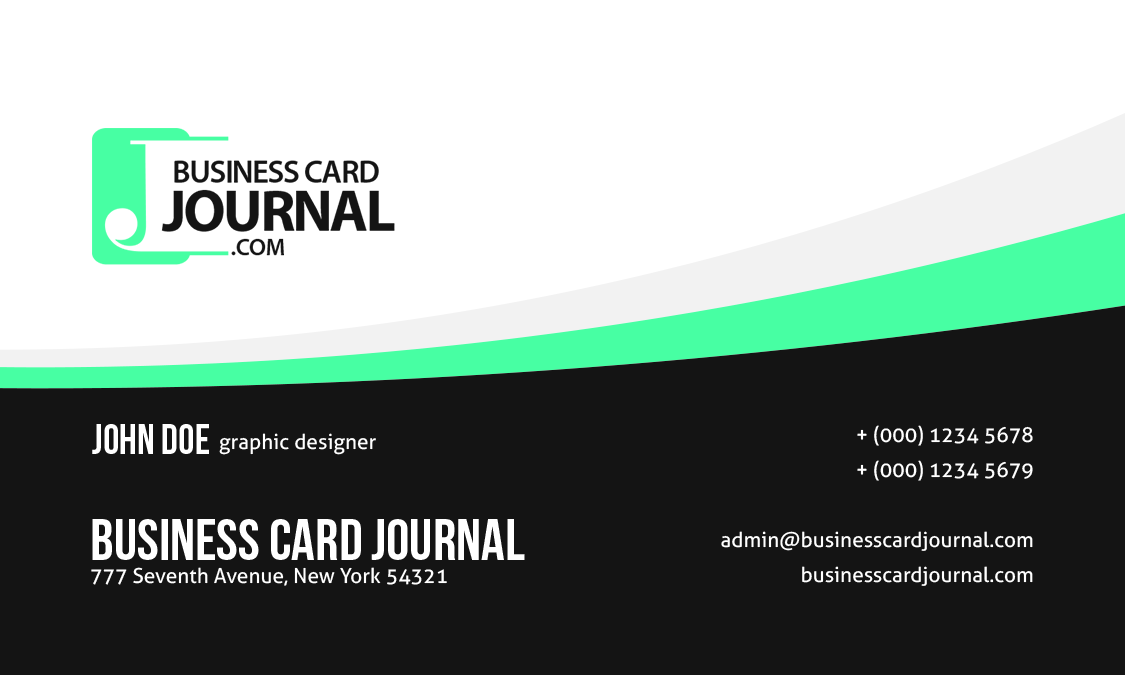
<style>
.page{position:relative;width:1125px;height:675px;background:#141414}
.page>*{position:absolute;margin:0}
.t1{font:41.7px "BebasNeue";color:#ffffff;text-transform:uppercase}
.t2{font:20.8px/35px "Aller";color:#ffffff}
.t3{font:20.8px "Aller";color:#ffffff}
.t4{font:58.3px "BebasNeue";color:#ffffff;text-transform:uppercase}
</style>
<div class="page">
<p class="t1" style="left:92px;top:424px;width:117px;height:30px">John Doe</p>
<p class="t2" style="left:721px;top:425px;width:312px;height:161px;text-align:right">+ (000) 1234 5678<br>+ (000) 1234 5679<br><br>admin@businesscardjournal.com<br>businesscardjournal.com</p>
<p class="t3" style="left:219px;top:433px;width:157px;height:22px">graphic designer</p>
<p class="t4" style="left:92px;top:519px;width:433px;height:41px">Business Card Journal</p>
<p class="t3" style="left:91px;top:567px;width:356px;height:19px">777 Seventh Avenue, New York 54321</p>
</div>
